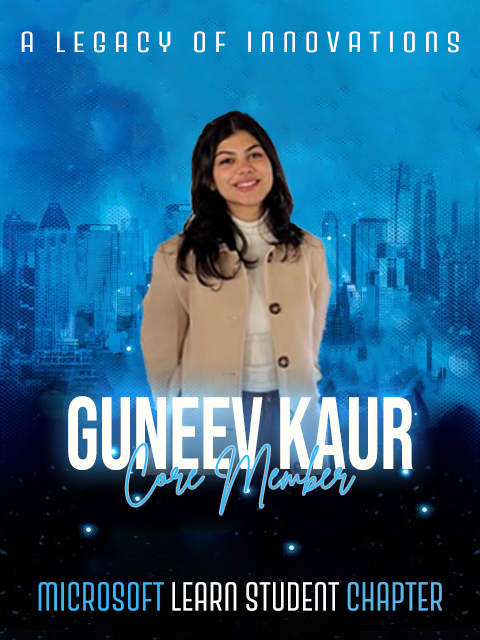
<style>
.page{position:relative;width:480px;height:640px}
.page>*{position:absolute;margin:0}
.t1{font:27.9px "FONTSPRINGDEMO-SurimiRegular";letter-spacing:0.18em;color:#ffffff;scale:1.39 1}
.t2{font:102px "BebasNeue-Regular";color:#fffdf7;scale:0.83 1}
.t3{font:43.7px "BrittanySignatureRegular";color:#2db7f8}
.t4{font:38.8px "FONTSPRINGDEMO-SurimiRegular";color:#fdfdfd}
.t5{font:38.8px "FONTSPRINGDEMO-SurimiRegular";color:#39b7f4}
.t6{font:38.8px "FONTSPRINGDEMO-SurimiRegular";color:#5cb6e5}
</style>
<div class="page">
<p class="t1" style="left:21px;top:31px;width:438px;height:22px">A LEGACY OF INNOVATIONS</p>
<p class="t2" style="left:68px;top:396px;width:345px;height:74px">GUNEEV KAUR</p>
<p class="t3" style="left:125px;top:443px;width:230px;height:72px">Core Member</p>
<p class="t4" style="left:38px;top:582px;width:404px;height:29px"><span class="t5">MICROSOFT </span>LEARN STUDENT <span class="t6">CHAPTER</span></p>
</div>
